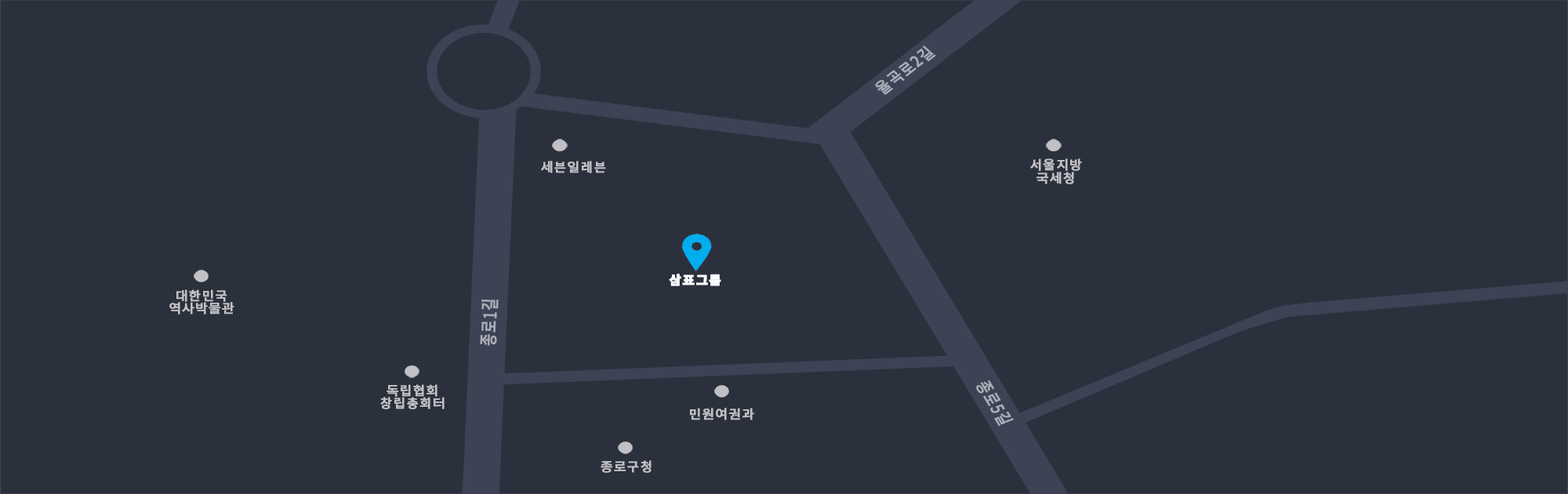
<style>
.page{position:relative;width:1568px;height:494px;background:#2a303c}
.page>*{position:absolute;margin:0}
.t1{font:16.7px "NotoSansKR-Medium";letter-spacing:0.06em;color:#a8acb5;font-weight:bold;scale:0.87 1}
.t2{font:12.6px "NotoSansKR-Medium";letter-spacing:0.06em;color:#c1c0c5;font-weight:bold;scale:1.04 1}
.t3{font:12.6px/12.6px "NotoSansKR-Medium";letter-spacing:0.06em;color:#c1c0c5;font-weight:bold;scale:1.04 1}
.t4{font:12.6px "NotoSansKR-Black";letter-spacing:0.06em;color:#fcfdff;font-weight:bold;scale:1.04 1}
.t5{font:18.3px "NotoSansKR-Medium";letter-spacing:0.06em;color:#a8acb5;font-weight:bold;scale:0.71 1}
.t6{font:17.8px "NotoSansKR-Medium";letter-spacing:0.06em;color:#a8acb5;font-weight:bold;scale:0.77 1}
</style>
<div class="page">
<p class="t1" style="left:875px;top:45px;width:61px;height:50px;rotate:-37deg">율곡로2길</p>
<p class="t2" style="left:541px;top:161px;width:65px;height:12px">세븐일레븐</p>
<p class="t3" style="left:1030px;top:158px;width:52px;height:26px;text-align:center">서울지방<br>국세청</p>
<p class="t4" style="left:669px;top:274px;width:52px;height:12px">삼표그룹</p>
<p class="t3" style="left:169px;top:289px;width:65px;height:25px;text-align:center">대한민국<br>역사박물관</p>
<p class="t5" style="left:480px;top:299px;width:19px;height:47px;rotate:-88deg">종로1길</p>
<p class="t3" style="left:380px;top:384px;width:65px;height:25px;text-align:center">독립협회<br>창립총회터</p>
<p class="t6" style="left:976px;top:380px;width:38px;height:46px;rotate:59deg">종로5길</p>
<p class="t2" style="left:690px;top:408px;width:64px;height:12px">민원여권과</p>
<p class="t2" style="left:601px;top:460px;width:51px;height:13px">종로구청</p>
</div>
